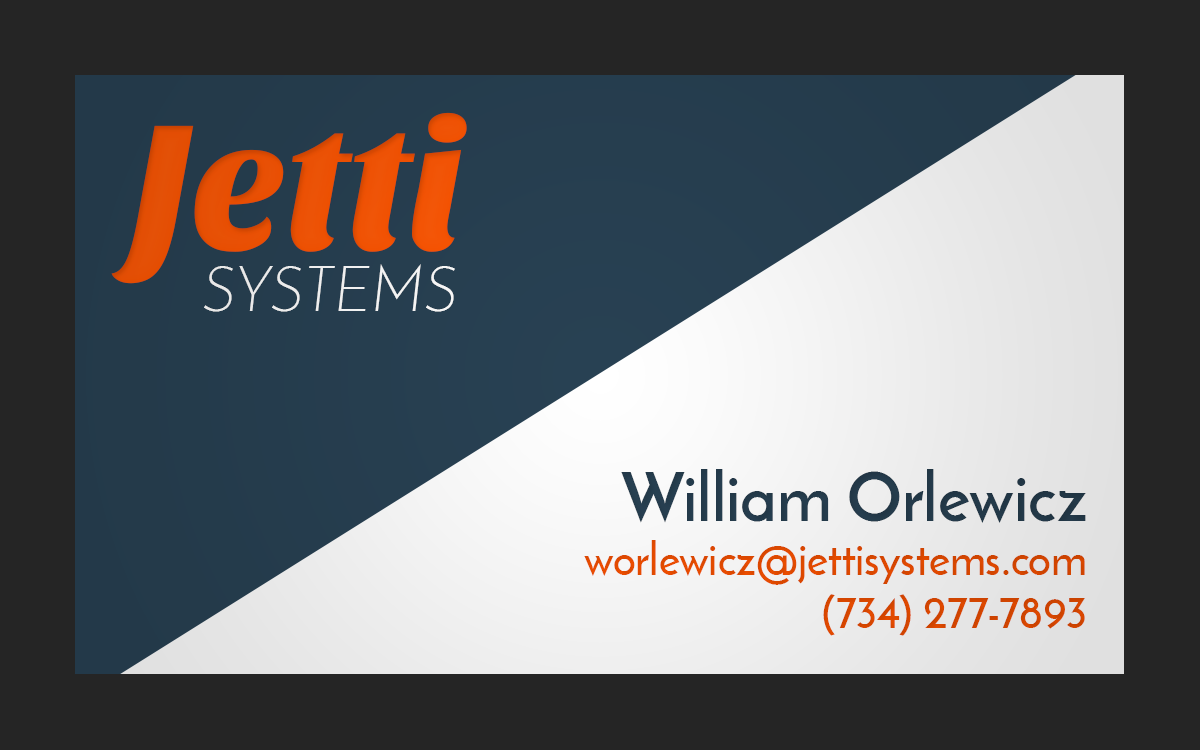
<style>
.page{position:relative;width:1200px;height:750px;background:#252525}
.page>*{position:absolute;margin:0}
.t1{font:185.5px "SansitaOne";letter-spacing:-0.01em;color:#e85004;scale:0.95 1}
.t2{font:62.6px "JosefinSans-LightItalic";letter-spacing:0.01em;color:#ffffff;text-transform:uppercase;scale:0.95 1}
.t3{font:44.7px "JosefinSans-SemiBold"}
.t4{font:67.1px "JosefinSans-Bold"}
</style>
<div class="page">
<p class="t1" style="left:111px;top:112px;width:356px;height:172px">Jetti</p>
<p class="t2" style="left:204px;top:264px;width:251px;height:48px">systems</p>
<p class="t3" style="left:584px;top:469px;width:502px;height:167px;text-align:right"><span class="t4">William Orlewicz<br></span>worlewicz@jettisystems.com<br>(734) 277-7893</p>
</div>
